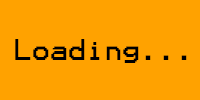
<style>
.page{position:relative;width:200px;height:100px;background:#ffa200}
.page>*{position:absolute;margin:0}
.t1{font:24px "Terminal";color:#000000}
</style>
<div class="page">
<p class="t1" style="left:15px;top:39px;width:172px;height:24px">...Loading</p>
</div>
